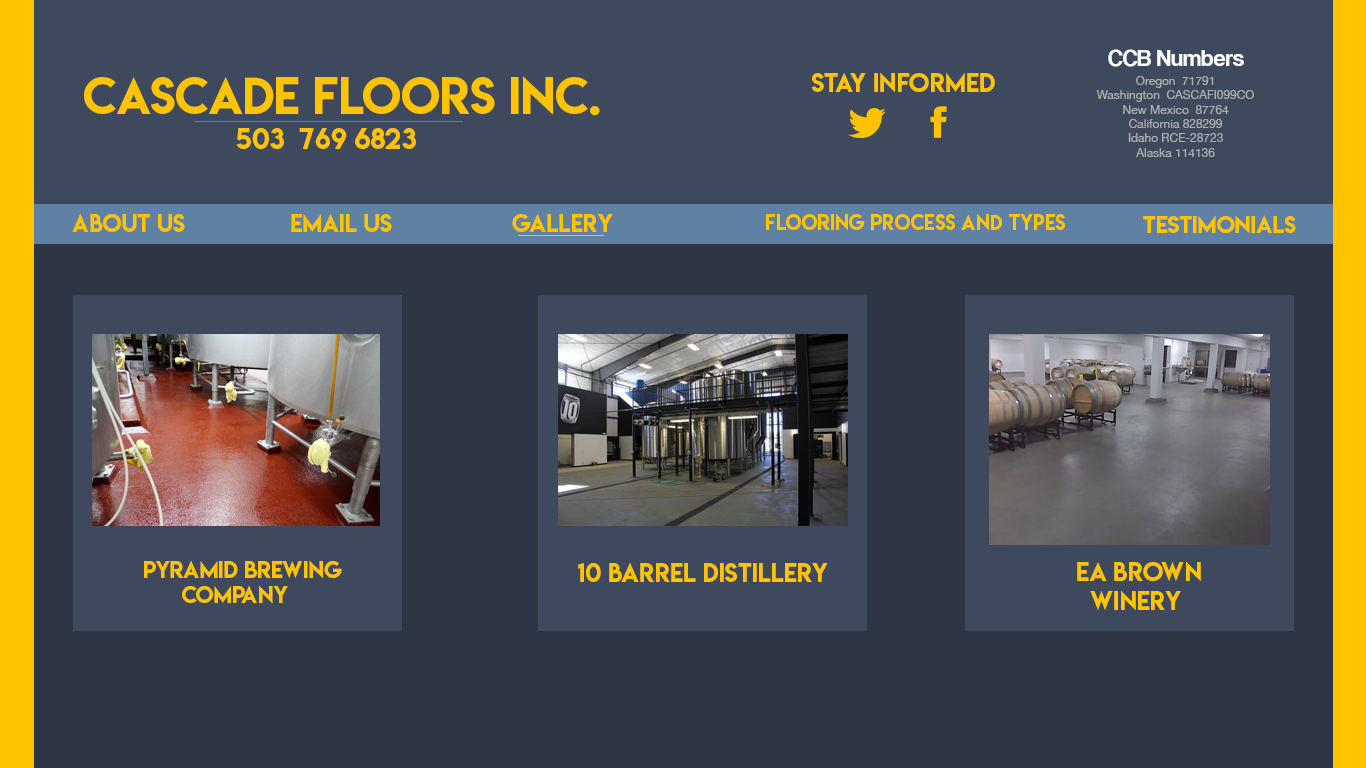
<style>
.page{position:relative;width:1366px;height:768px;background:#3e495e}
.page>*{position:absolute;margin:0}
.t1{font:23.5px "CoolveticaRg-Regular";color:#ffffff}
.t2{font:46px "LemonMilk";color:#ffc300}
.t3{font:24px "LemonMilk";color:#ffc300}
.t4{font:12px "HelveticaNeue";color:#aeaeae}
.t5{font:26.3px "LemonMilk";color:#ffc300}
.t6{font:22.4px "LemonMilk";color:#ffc300}
.t7{font:19.2px "LemonMilk";color:#ffc300}
.t8{font:21.6px "LemonMilk";color:#ffc300}
.t9{font:21.2px "LemonMilk";color:#ffc300}
.t10{font:23.7px "LemonMilk";color:#ffc300}
</style>
<div class="page">
<p class="t1" style="left:1108px;top:49px;width:136px;height:18px">CCB Numbers</p>
<p class="t2" style="left:84px;top:76px;width:516px;height:40px">Cascade Floors Inc.</p>
<p class="t3" style="left:811px;top:72px;width:184px;height:21px">Stay informed</p>
<p class="t4" style="left:1096px;top:76px;width:158px;height:81px;text-align:center">Oregon  71791<br>Washington  CASCAFI099CO<br>New Mexico  87764<br>California 828299<br>Idaho RCE-28723<br>Alaska 114136</p>
<p class="t5" style="left:236px;top:128px;width:180px;height:21px">503  769 6823</p>
<p class="t6" style="left:72px;top:213px;width:113px;height:19px">about us</p>
<p class="t6" style="left:291px;top:213px;width:101px;height:19px">email us</p>
<p class="t6" style="left:512px;top:213px;width:101px;height:19px">gallery</p>
<p class="t7" style="left:766px;top:213px;width:299px;height:18px">Flooring Process and Types</p>
<p class="t8" style="left:1143px;top:215px;width:153px;height:19px">Testimonials</p>
<p class="t9" style="left:144px;top:560px;width:198px;height:44px">Pyramid Brewing<br>   Company</p>
<p class="t3" style="left:578px;top:562px;width:250px;height:20px">10 Barrel Distillery</p>
<p class="t10" style="left:1077px;top:561px;width:124px;height:50px">EA Brown<br> Winery</p>
</div>
